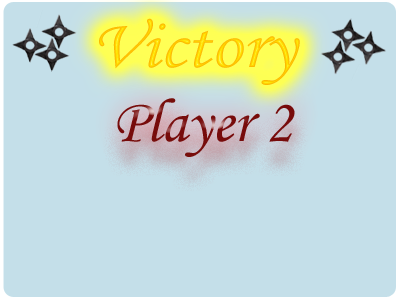
<style>
.page{position:relative;width:400px;height:300px;background:#c4dfe9}
.page>*{position:absolute;margin:0}
.t1{font:70.1px "MonotypeCorsiva";color:#fece00;scale:1.11 1}
.t2{font:62px "MonotypeCorsiva";color:#770b0b}
</style>
<div class="page">
<p class="t1" style="left:99px;top:18px;width:201px;height:67px">Victory</p>
<p class="t2" style="left:117px;top:98px;width:178px;height:59px">Player 2</p>
</div>
